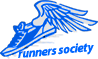
<style>
.page{position:relative;width:98px;height:59px;background:#ffffff}
.page>*{position:absolute;margin:0}
.t1{font:12.7px "MyriadPro-BoldIt";letter-spacing:-0.01em;color:#0066ff;scale:0.92 1}
</style>
<div class="page">
<p class="t1" style="left:18px;top:43px;width:76px;height:15px">runners society</p>
</div>
